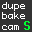
<style>
.page{position:relative;width:32px;height:32px;background:#333333}
.page>*{position:absolute;margin:0}
.t1{font:9px/10.4px "Monaco";letter-spacing:0.06em;color:#ffffff}
.t2{font:12.2px "Monaco";letter-spacing:0.06em;color:#00ff30;font-weight:bold}
</style>
<div class="page">
<p class="t1" style="left:2px;top:2px;width:23px;height:28px">dupe<br>bake<br>cam</p>
<p class="t2" style="left:24px;top:21px;width:6px;height:9px">S</p>
</div>
